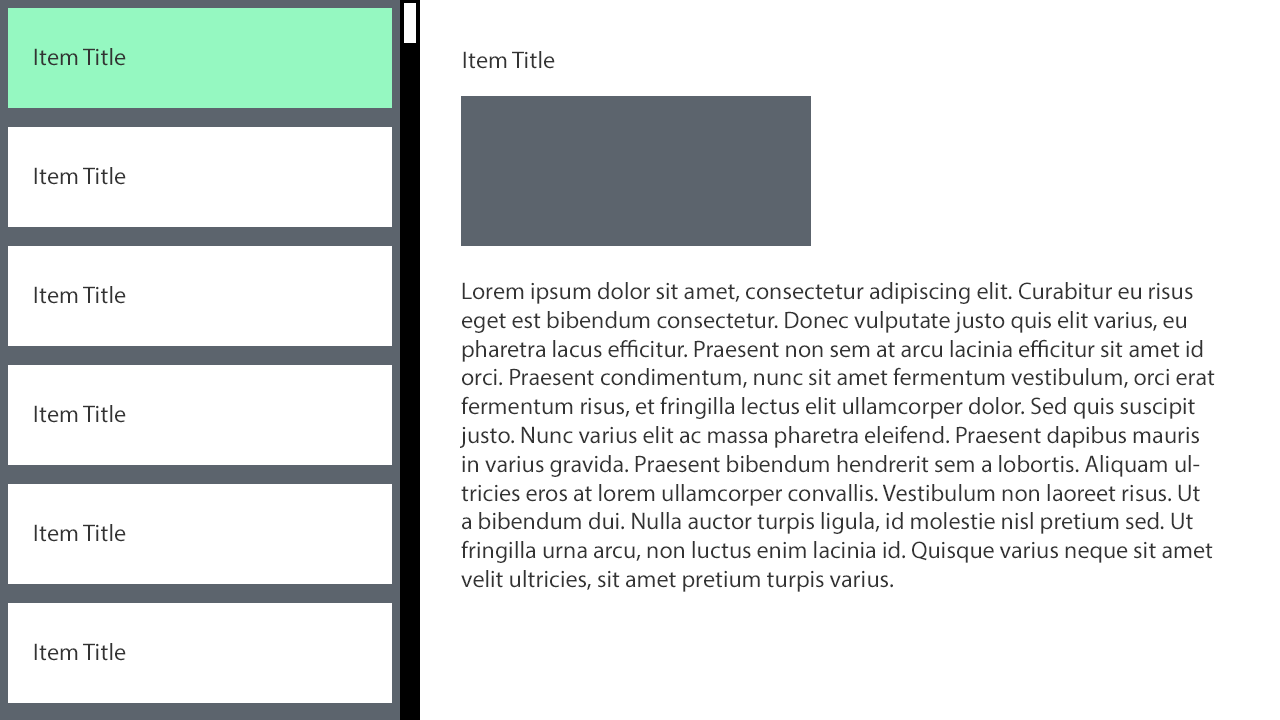
<style>
.page{position:relative;width:1280px;height:720px;background:#ffffff}
.page>*{position:absolute;margin:0}
.t1{font:24px "MyriadPro-Regular";color:#333333}
</style>
<div class="page">
<p class="t1" style="left:34px;top:48px;width:92px;height:18px">Item Title</p>
<p class="t1" style="left:463px;top:51px;width:92px;height:18px">Item Title</p>
<p class="t1" style="left:34px;top:167px;width:92px;height:18px">Item Title</p>
<p class="t1" style="left:34px;top:286px;width:92px;height:18px">Item Title</p>
<p class="t1" style="left:460px;top:282px;width:755px;height:310px">Lorem ipsum dolor sit amet, consectetur adipiscing elit. Curabitur eu risus eget est bibendum consectetur. Donec vulputate justo quis elit varius, eu pharetra lacus efficitur. Praesent non sem at arcu lacinia efficitur sit amet id orci. Praesent condimentum, nunc sit amet fermentum vestibulum, orci erat fermentum risus, et fringilla lectus elit ullamcorper dolor. Sed quis suscipit justo. Nunc varius elit ac massa pharetra eleifend. Praesent dapibus mauris in varius gravida. Praesent bibendum hendrerit sem a lobortis. Aliquam ultricies eros at lorem ullamcorper convallis. Vestibulum non laoreet risus. Ut a bibendum dui. Nulla auctor turpis ligula, id molestie nisl pretium sed. Ut fringilla urna arcu, non luctus enim lacinia id. Quisque varius neque sit amet velit ultricies, sit amet pretium turpis varius.</p>
<p class="t1" style="left:34px;top:405px;width:92px;height:18px">Item Title</p>
<p class="t1" style="left:34px;top:524px;width:92px;height:18px">Item Title</p>
<p class="t1" style="left:34px;top:643px;width:92px;height:18px">Item Title</p>
</div>
